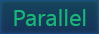
<style>
.page{position:relative;width:99px;height:34px}
.page>*{position:absolute;margin:0}
.t1{font:23.3px "SegoeUISymbol";color:#19b579}
</style>
<div class="page">
<p class="t1" style="left:14px;top:9px;width:72px;height:17px">Parallel</p>
</div>
